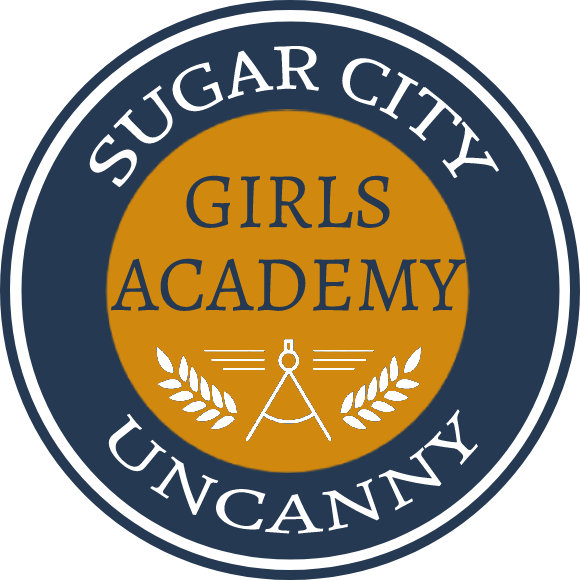
<style>
.page{position:relative;width:580px;height:580px;background:#253952}
.page>*{position:absolute;margin:0}
.t1{font:60px "AndadaSC-Regular";color:#ffffff}
.t2{font:79px "AlegreyaSC-Regular";color:#253952}
.t3{font:60px "AlegreyaSC-Regular";color:#ffffff}
</style>
<div class="page">
<p class="t1" style="left:89px;top:45px;width:411px;height:143px;text-align:center">SUGAR CITY</p>
<p class="t2" style="left:186px;top:175px;width:204px;height:54px">GIRLS</p>
<p class="t2" style="left:110px;top:258px;width:356px;height:54px">ACADEMY</p>
<p class="t3" style="left:108px;top:409px;width:370px;height:125px;text-align:center">UNCANNY</p>
</div>
